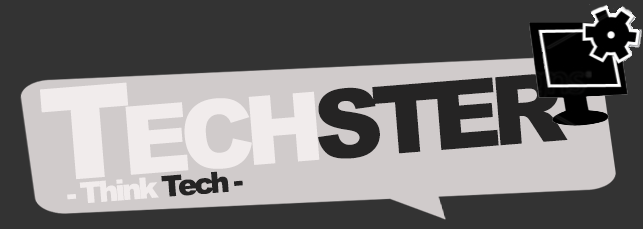
<style>
.page{position:relative;width:643px;height:229px;background:#333333}
.page>*{position:absolute;margin:0}
.t1{font:95px "Arial-Black";letter-spacing:-0.1em;color:#252424}
.t2{font:128.6px "Arial-Black";letter-spacing:-0.1em;color:#f1ecec}
.t3{font:95px "Arial-Black";letter-spacing:-0.1em;color:#f1ecec}
.t4{font:29px "Arial-Black";letter-spacing:-0.1em;color:#f1ecec}
.t5{font:29px "Arial-Black";letter-spacing:-0.1em;color:#252424}
</style>
<div class="page">
<p class="t1" style="left:40px;top:74px;width:528px;height:106px;rotate:-5deg"><span class="t2">T</span><span class="t3">ECH</span>STER</p>
<p class="t4" style="left:67px;top:171px;width:176px;height:32px;rotate:-5deg">- Think <span class="t5">Tech -</span></p>
</div>
